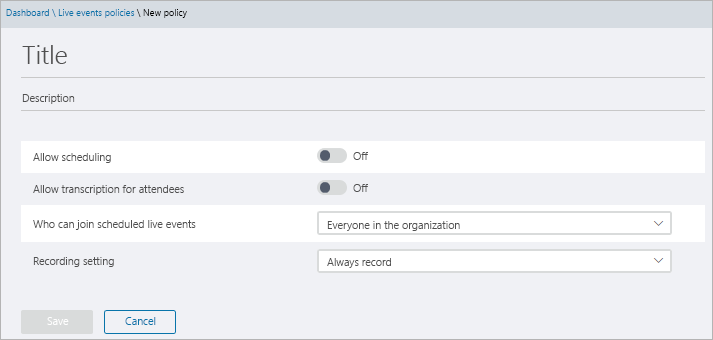
<style>
.page{position:relative;width:713px;height:340px;background:#f0f1f5}
.page>*{position:absolute;margin:0}
.t1{font:9.3px "SegoeUI-Semilight";color:#0874aa}
.t2{font:9.3px "SegoeUI-Semilight";color:#000000}
.t3{font:25.8px "SegoeUI-Semilight";color:#505050}
.t4{font:10.8px "SegoeUI-Semilight";color:#505050}
.t5{font:10.8px "SegoeUI-Semilight";color:#ffffff}
.t6{font:10.8px "SegoeUI-Semilight";color:#0874aa}
</style>
<div class="page">
<p class="t1" style="left:6px;top:9px;width:181px;height:9px">Dashboard \ Live events policies<span class="t2"> \ New policy</span></p>
<p class="t3" style="left:22px;top:45px;width:45px;height:19px">Title</p>
<p class="t4" style="left:22px;top:94px;width:53px;height:10px">Description</p>
<p class="t4" style="left:33px;top:153px;width:78px;height:10px">Allow scheduling</p>
<p class="t4" style="left:353px;top:152px;width:15px;height:8px">Off</p>
<p class="t4" style="left:33px;top:185px;width:151px;height:10px">Allow transcription for attendees</p>
<p class="t4" style="left:353px;top:184px;width:15px;height:8px">Off</p>
<p class="t4" style="left:33px;top:220px;width:163px;height:10px">Who can join scheduled live events</p>
<p class="t4" style="left:327px;top:221px;width:133px;height:10px">Everyone in the organization</p>
<p class="t4" style="left:33px;top:257px;width:81px;height:10px">Recording setting</p>
<p class="t4" style="left:327px;top:258px;width:64px;height:10px">Always record</p>
<p class="t5" style="left:47px;top:317px;width:22px;height:8px">Save</p>
<p class="t6" style="left:125px;top:317px;width:31px;height:8px">Cancel</p>
</div>
